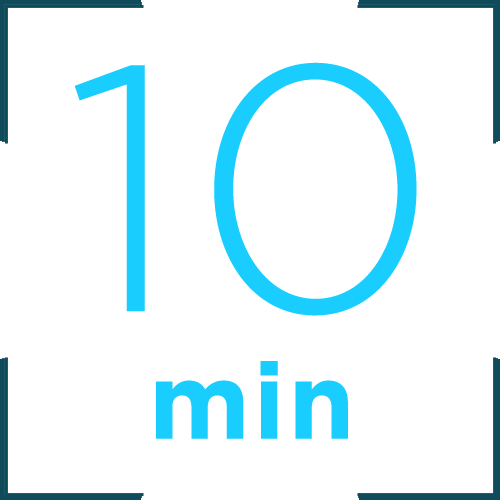
<style>
.page{position:relative;width:500px;height:500px;background:#ffffff}
.page>*{position:absolute;margin:0}
.t1{font:106.3px "Gotham-Bold";letter-spacing:0.03em;color:#19ceff}
.t2{font:348.5px "Gotham-Light";letter-spacing:0.03em;color:#19ceff}
</style>
<div class="page">
<p class="t1" style="left:74px;top:62px;width:343px;height:377px;text-align:center"><span class="t2">10<br></span>min</p>
</div>
